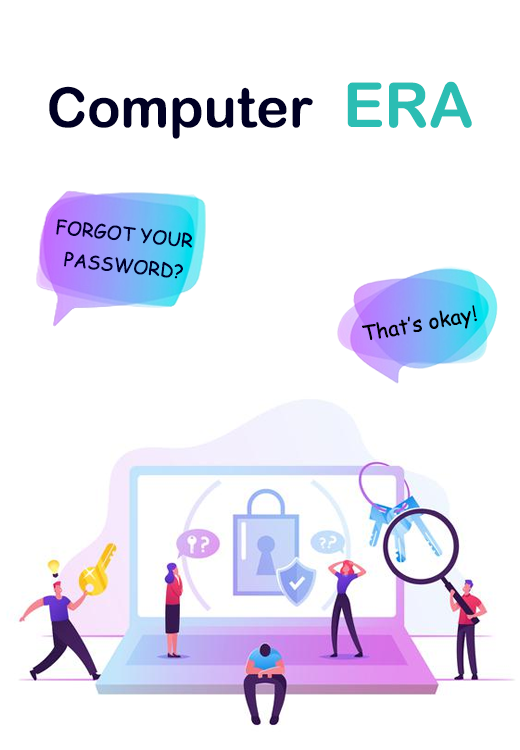
<style>
.page{position:relative;width:520px;height:750px;background:#ffffff}
.page>*{position:absolute;margin:0}
.t1{font:55px "ArialRoundedMTBold";color:#000024}
.t2{font:62px "ArialRoundedMTBold";color:#2bbdb3}
.t3{font:18.9px/31.6px "ComicSansMS";color:#00002d}
.t4{font:21px "ComicSansMS";color:#000004}
.t5{font:21px "CenturyGothic";color:#000004}
</style>
<div class="page">
<p class="t1" style="left:49px;top:81px;width:423px;height:58px">Computer  <span class="t2">ERA</span></p>
<p class="t3" style="left:56px;top:219px;width:136px;height:60px;text-align:center;rotate:6deg">FORGOT YOUR <br>PASSWORD?</p>
<p class="t4" style="left:362px;top:305px;width:115px;height:35px;rotate:-10deg">That’s okay<span class="t5">!</span></p>
</div>
